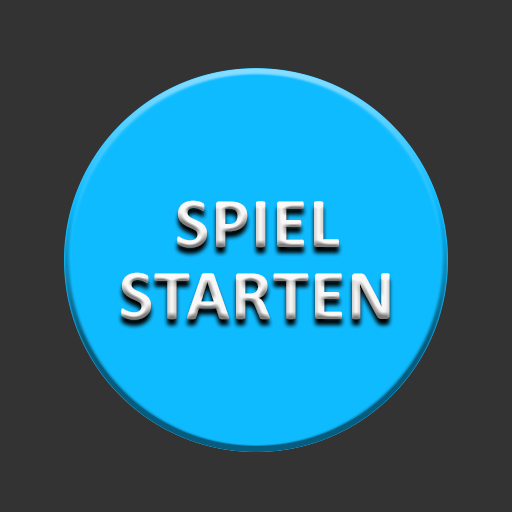
<style>
.page{position:relative;width:512px;height:512px;background:#333333}
.page>*{position:absolute;margin:0}
.t1{font:72px/72px "Calibri-Bold";letter-spacing:0.025em;color:#e9e8e7}
</style>
<div class="page">
<p class="t1" style="left:121px;top:200px;width:269px;height:120px;text-align:center">SPIEL<br>STARTEN</p>
</div>
